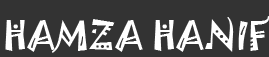
<style>
.page{position:relative;width:269px;height:57px;background:#333333}
.page>*{position:absolute;margin:0}
.t1{font:36px "Jokerman-Regular";color:#ffffff;text-transform:uppercase}
</style>
<div class="page">
<p class="t1" style="left:5px;top:16px;width:264px;height:37px">HAMZA HANIF</p>
</div>
